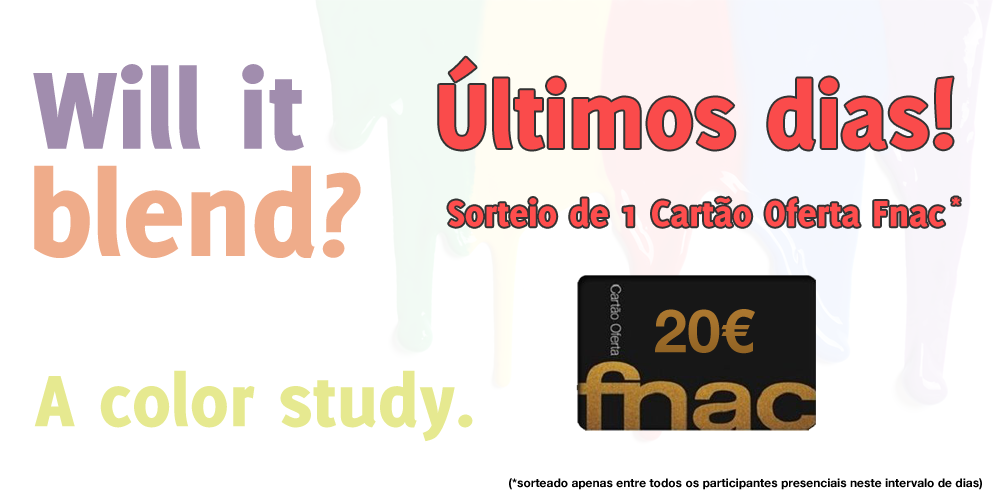
<style>
.page{position:relative;width:998px;height:500px;background:#ffffff}
.page>*{position:absolute;margin:0}
.t1{font:120px "Delicious-Heavy";color:#a18dae}
.t2{font:100px "Delicious-Heavy";color:#fa4b4b}
.t3{font:130px "Delicious-Heavy";color:#efac8a}
.t4{font:120px "Delicious-Heavy";color:#efac8a}
.t5{font:40px "Delicious-Heavy";color:#ff4d4d}
.t6{font:20px "Delicious-Heavy";color:#ff4d4d}
.t7{font:60px "HelveticaNeue-Bold";color:#9e6d21}
.t8{font:80px "Delicious-Heavy";color:#e6e990}
.t9{font:12px "HelveticaNeue-Bold";color:#000000}
</style>
<div class="page">
<p class="t1" style="left:33px;top:64px;width:271px;height:87px">Will it</p>
<p class="t2" style="left:439px;top:57px;width:514px;height:93px">Últimos dias!</p>
<p class="t3" style="left:34px;top:165px;width:327px;height:93px">blend<span class="t4">?</span></p>
<p class="t5" style="left:448px;top:197px;width:497px;height:30px">Sorteio de 1 Cartão Oferta Fnac</p>
<p class="t6" style="left:952px;top:197px;width:8px;height:8px">*</p>
<p class="t7" style="left:655px;top:309px;width:100px;height:45px">20€</p>
<p class="t8" style="left:34px;top:370px;width:439px;height:72px">A color study.</p>
<p class="t9" style="left:509px;top:478px;width:473px;height:12px">(*sorteado apenas entre todos os participantes presenciais neste intervalo de dias)</p>
</div>
